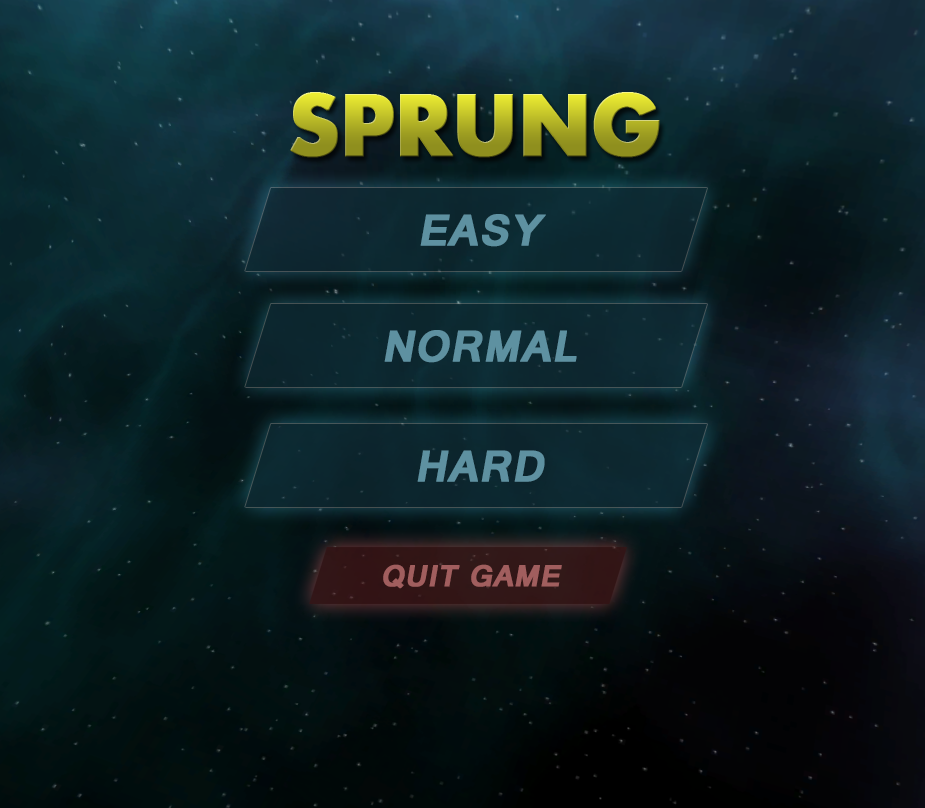
<style>
.page{position:relative;width:925px;height:808px}
.page>*{position:absolute;margin:0}
.t1{font:47.2px "Raavi-Bold";color:#5e91a1;font-weight:bold;font-style:italic}
.t2{font:32.4px "Raavi-Bold";color:#a15e5e;font-weight:bold;font-style:italic}
</style>
<div class="page">
<p class="t1" style="left:420px;top:214px;width:126px;height:33px">EASY</p>
<p class="t1" style="left:384px;top:330px;width:193px;height:33px">NORMAL</p>
<p class="t1" style="left:417px;top:450px;width:128px;height:32px">HARD</p>
<p class="t2" style="left:383px;top:564px;width:179px;height:25px">QUIT GAME</p>
</div>
